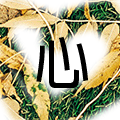
<style>
.page{position:relative;width:120px;height:120px}
.page>*{position:absolute;margin:0}
.t1{font:56px "AdobeFanHeitiStd-Bold";color:#000000}
</style>
<div class="page">
<p class="t1" style="left:36px;top:36px;width:53px;height:52px">心</p>
</div>
